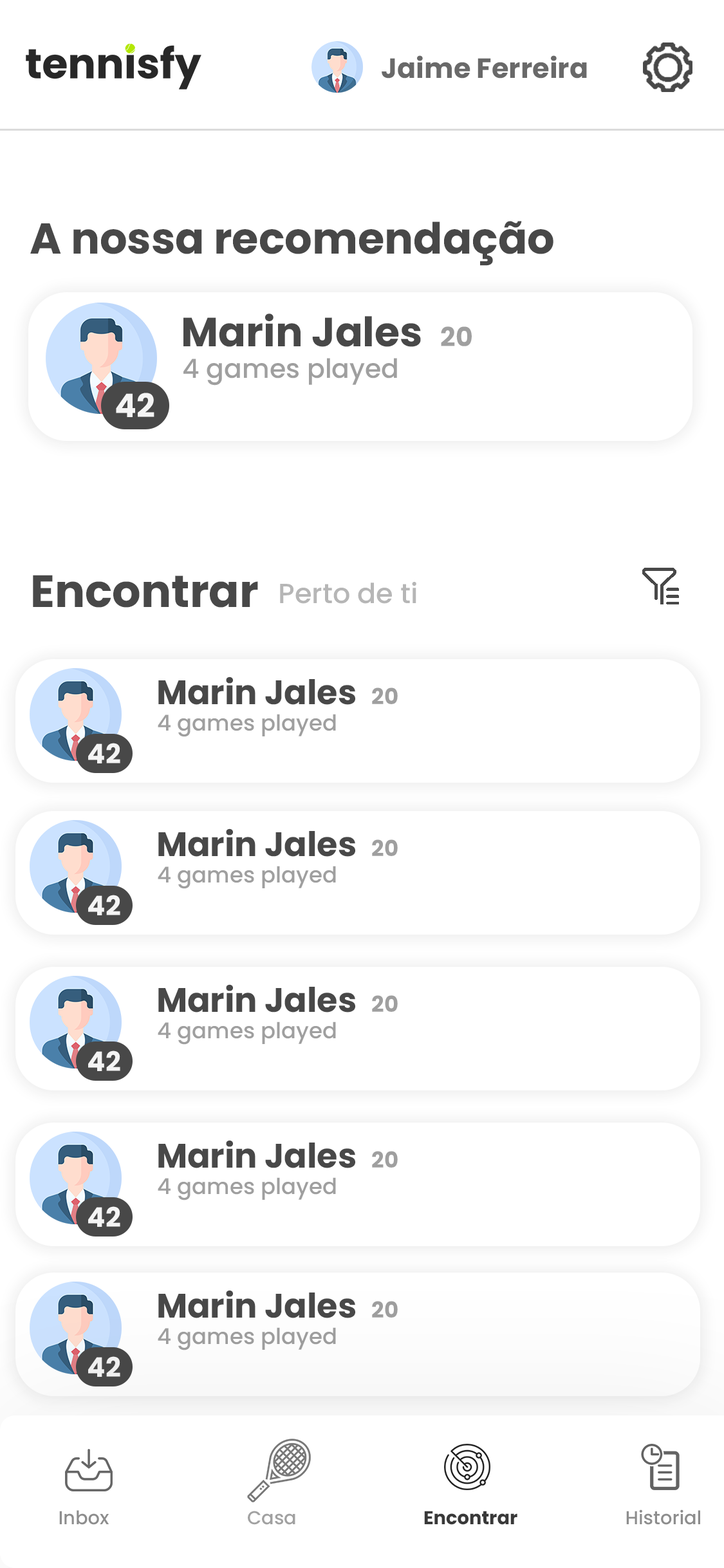
<style>
.page{position:relative;width:724px;height:1568px;background:#ffffff}
.page>*{position:absolute;margin:0}
.t1{font:27.7px "Poppins-Bold";color:#696969}
.t2{font:43.1px "Poppins-Bold";color:#484848}
.t3{font:40.8px "Poppins-Bold";color:#484848}
.t4{font:26.4px "Poppins-Bold";color:#9f9f9f}
.t5{font:26.4px "Poppins-Medium";color:#9f9f9f}
.t6{font:32.4px "Poppins-Bold";color:#f4f4f4}
.t7{font:45.1px "Poppins-Bold";color:#484848}
.t8{font:27.7px "Poppins-Medium";color:#b6b6b6}
.t9{font:33.9px "Poppins-Bold";color:#484848}
.t10{font:22px "Poppins-Bold";color:#9f9f9f}
.t11{font:22px "Poppins-Medium";color:#9f9f9f}
.t12{font:26.9px "Poppins-Bold";color:#f4f4f4}
.t13{font:22px "Poppins-Bold";color:#9e9e9e}
.t14{font:22px "Poppins-Medium";color:#9d9d9d}
.t15{font:18.7px "Poppins-Medium";color:#8d8d8d}
.t16{font:18.7px "Poppins-Medium";color:#a1a1a1}
.t17{font:18.7px "Poppins-Bold";color:#393939}
</style>
<div class="page">
<p class="t1" style="left:382px;top:55px;width:205px;height:24px">Jaime Ferreira</p>
<p class="t2" style="left:30px;top:221px;width:524px;height:45px">A nossa recomendação</p>
<p class="t3" style="left:183px;top:313px;width:238px;height:34px">Marin Jales</p>
<p class="t4" style="left:441px;top:326px;width:31px;height:20px">20</p>
<p class="t5" style="left:183px;top:358px;width:214px;height:28px">4 games played</p>
<p class="t6" style="left:116px;top:393px;width:38px;height:24px">42</p>
<p class="t7" style="left:33px;top:575px;width:225px;height:33px">Encontrar</p>
<p class="t8" style="left:280px;top:582px;width:136px;height:22px">Perto de ti</p>
<p class="t9" style="left:158px;top:677px;width:197px;height:28px">Marin Jales</p>
<p class="t10" style="left:372px;top:687px;width:26px;height:17px">20</p>
<p class="t11" style="left:158px;top:714px;width:178px;height:23px">4 games played</p>
<p class="t12" style="left:88px;top:743px;width:32px;height:20px">42</p>
<p class="t9" style="left:158px;top:828px;width:197px;height:29px">Marin Jales</p>
<p class="t10" style="left:372px;top:839px;width:26px;height:17px">20</p>
<p class="t11" style="left:158px;top:866px;width:178px;height:23px">4 games played</p>
<p class="t12" style="left:88px;top:895px;width:32px;height:20px">42</p>
<p class="t9" style="left:158px;top:984px;width:197px;height:29px">Marin Jales</p>
<p class="t10" style="left:372px;top:995px;width:26px;height:17px">20</p>
<p class="t11" style="left:158px;top:1022px;width:178px;height:23px">4 games played</p>
<p class="t12" style="left:88px;top:1050px;width:32px;height:21px">42</p>
<p class="t9" style="left:158px;top:1140px;width:197px;height:28px">Marin Jales</p>
<p class="t10" style="left:372px;top:1151px;width:26px;height:17px">20</p>
<p class="t11" style="left:158px;top:1177px;width:178px;height:23px">4 games played</p>
<p class="t12" style="left:88px;top:1206px;width:32px;height:21px">42</p>
<p class="t9" style="left:158px;top:1290px;width:197px;height:28px">Marin Jales</p>
<p class="t13" style="left:372px;top:1301px;width:26px;height:17px">20</p>
<p class="t14" style="left:158px;top:1327px;width:178px;height:23px">4 games played</p>
<p class="t12" style="left:88px;top:1356px;width:32px;height:21px">42</p>
<p class="t15" style="left:59px;top:1510px;width:50px;height:15px">Inbox</p>
<p class="t16" style="left:248px;top:1511px;width:47px;height:14px">Casa</p>
<p class="t17" style="left:424px;top:1511px;width:94px;height:14px">Encontrar</p>
<p class="t15" style="left:626px;top:1509px;width:74px;height:16px">Historial</p>
</div>
